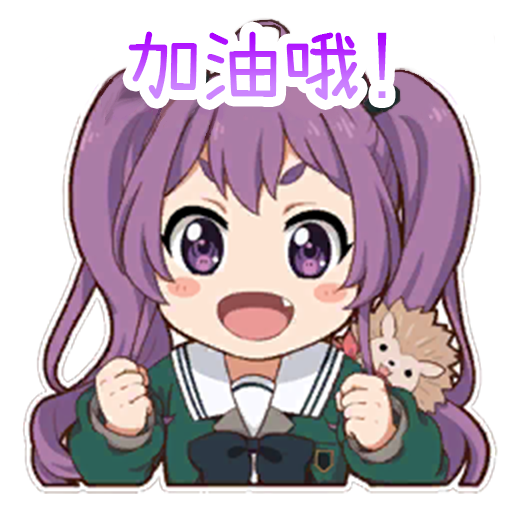
<style>
.page{position:relative;width:512px;height:512px;background:#ffffff}
.page>*{position:absolute;margin:0}
.t1{font:80.3px "SetoFont"}
.t2{font:80.3px "MS-Gothic"}
</style>
<div class="page">
<p class="t1" style="left:128px;top:31px;width:259px;height:69px">加油哦<span class="t2">!</span></p>
</div>
